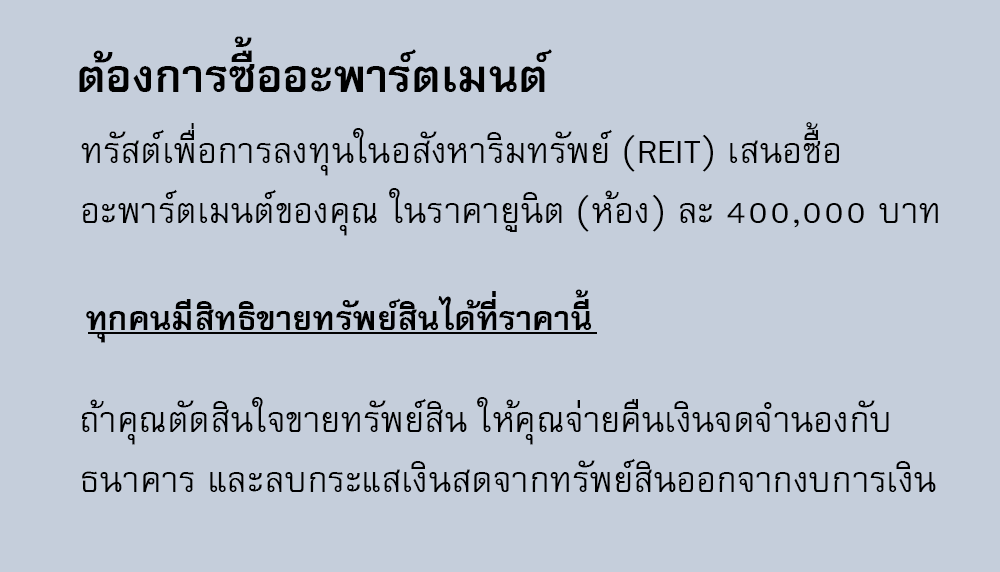
<style>
.page{position:relative;width:1000px;height:572px;background:#c5cedb}
.page>*{position:absolute;margin:0}
.t1{font:64px "FreesiaUPCBold";color:#000000}
.t2{font:50px/60px "FreesiaUPC";color:#000000}
.t3{font:47px "FreesiaUPCBold";color:#000000}
</style>
<div class="page">
<p class="t1" style="left:79px;top:36px;width:473px;height:56px">ต้องการซื้ออะพาร์ตเมนต์</p>
<p class="t2" style="left:81px;top:122px;width:857px;height:114px">ทรัสต์เพื่อการลงทุนในอสังหาริมทรัพย์ (REIT) เสนอซื้อ<br>อะพาร์ตเมนต์ของคุณ ในราคายูนิต (ห้อง) ละ 400,000 บาท</p>
<p class="t3" style="left:86px;top:289px;width:506px;height:54px">ทุกคนมีสิทธิขายทรัพย์สินได้ที่ราคานี้</p>
<p class="t2" style="left:82px;top:397px;width:854px;height:95px">ถ้าคุณตัดสินใจขายทรัพย์สิน ให้คุณจ่ายคืนเงินจดจำนองกับ<br>ธนาคาร และลบกระแสเงินสดจากทรัพย์สินออกจากงบการเงิน</p>
</div>
